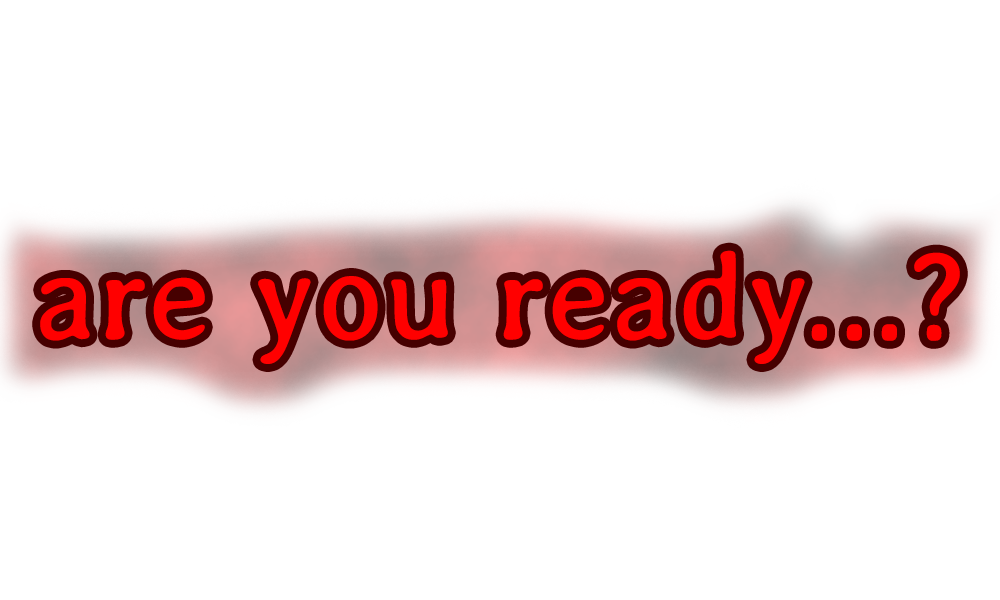
<style>
.page{position:relative;width:1000px;height:600px;background:#ffffff}
.page>*{position:absolute;margin:0}
.t1{font:126.1px "Averia-Regular";color:#ff0000}
</style>
<div class="page">
<p class="t1" style="left:40px;top:250px;width:920px;height:114px">are you ready...?</p>
</div>
